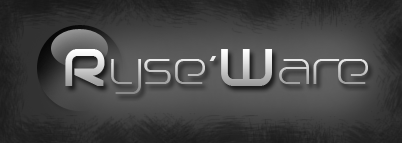
<style>
.page{position:relative;width:402px;height:143px}
.page>*{position:absolute;margin:0}
.t1{font:45px "BirdmanLight"}
.t2{font:60px "BirdmanBold"}
</style>
<div class="page">
<p class="t1" style="left:65px;top:49px;width:303px;height:45px"><span class="t2">R</span>yse'<span class="t2">w</span>are</p>
</div>
